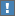
<style>
.page{position:relative;width:15px;height:16px;background:#4682b4}
.page>*{position:absolute;margin:0}
.t1{font:14px "Arial-Black";color:#ffffff}
</style>
<div class="page">
<p class="t1" style="left:5px;top:3px;width:4px;height:10px">!</p>
</div>
